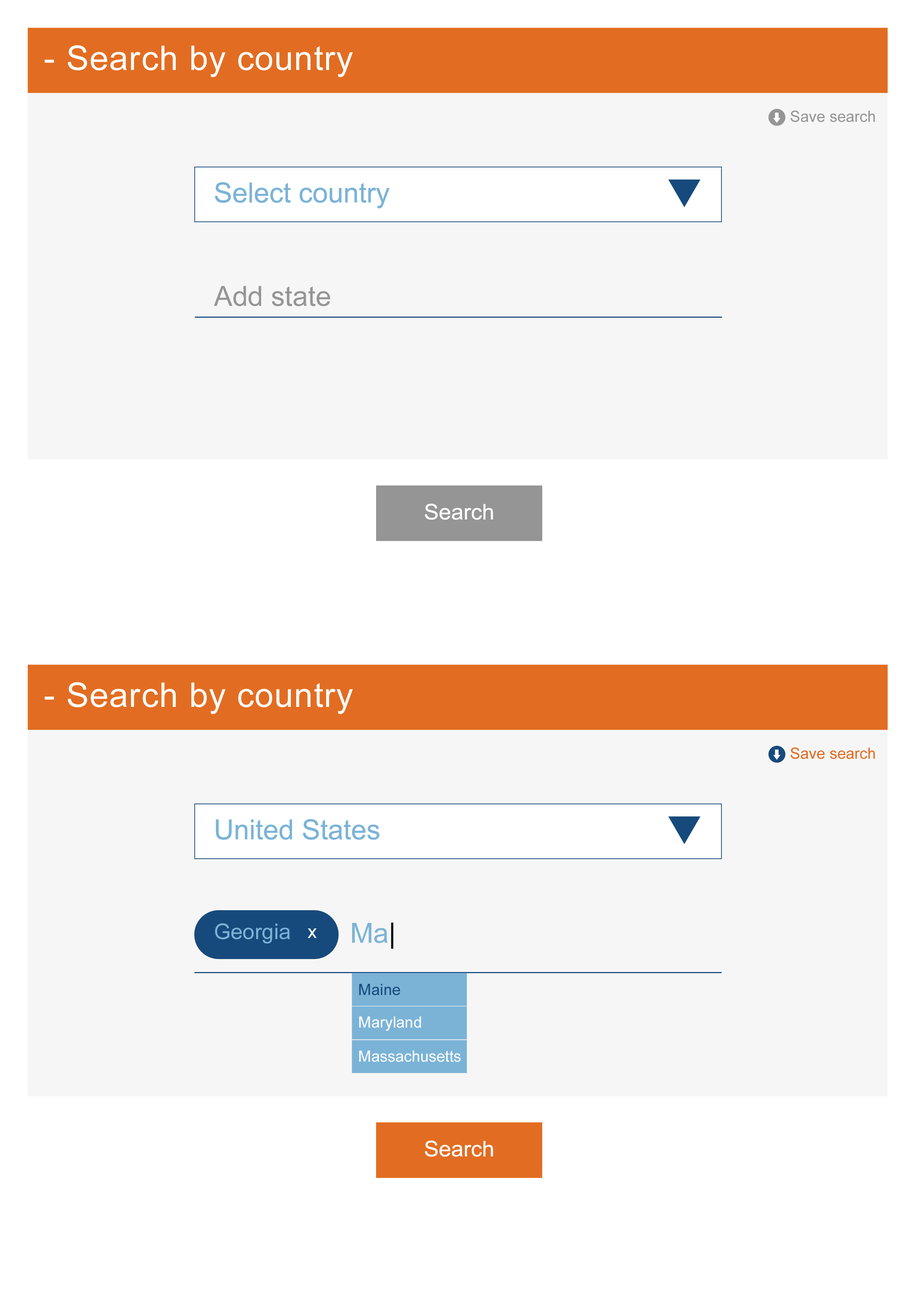
<style>
.page{position:relative;width:918px;height:1299px;background:#f7f6f6}
.page>*{position:absolute;margin:0}
.t1{font:33.9px "ArialMT";letter-spacing:0.025em;color:#ffffff}
.t2{font:15.4px "ArialMT";color:#959595}
.t3{font:27.8px "ArialMT";color:#7bb3d7}
.t4{font:27.8px "ArialMT";color:#959595}
.t5{font:21.6px "ArialMT";color:#ffffff}
.t6{font:15.4px "ArialMT";color:#e26d22}
.t7{font:21.6px "ArialMT";color:#7bb3d7}
.t8{font:18.5px "ArialMT";color:#ffffff}
.t9{font:27.8px "ArialMT";color:#000000}
.t10{font:15.4px "ArialMT";color:#174a7c}
.t11{font:15.4px "ArialMT";color:#ffffff}
</style>
<div class="page">
<p class="t1" style="left:44px;top:45px;width:309px;height:32px">- Search by country</p>
<p class="t2" style="left:791px;top:110px;width:84px;height:12px">Save search</p>
<p class="t3" style="left:215px;top:182px;width:175px;height:26px">Select country</p>
<p class="t4" style="left:214px;top:286px;width:116px;height:20px">Add state</p>
<p class="t5" style="left:425px;top:504px;width:68px;height:16px">Search</p>
<p class="t1" style="left:44px;top:682px;width:309px;height:32px">- Search by country</p>
<p class="t6" style="left:791px;top:747px;width:84px;height:12px">Save search</p>
<p class="t3" style="left:216px;top:819px;width:163px;height:21px">United States</p>
<p class="t7" style="left:215px;top:923px;width:75px;height:20px">Georgia</p>
<p class="t8" style="left:308px;top:928px;width:9px;height:10px">x</p>
<p class="t3" style="left:352px;top:922px;width:42px;height:27px">Ma<span class="t9">|</span></p>
<p class="t10" style="left:359px;top:984px;width:41px;height:11px">Maine</p>
<p class="t11" style="left:359px;top:1016px;width:62px;height:15px">Maryland</p>
<p class="t11" style="left:359px;top:1050px;width:102px;height:12px">Massachusetts</p>
<p class="t5" style="left:425px;top:1140px;width:68px;height:17px">Search</p>
</div>
